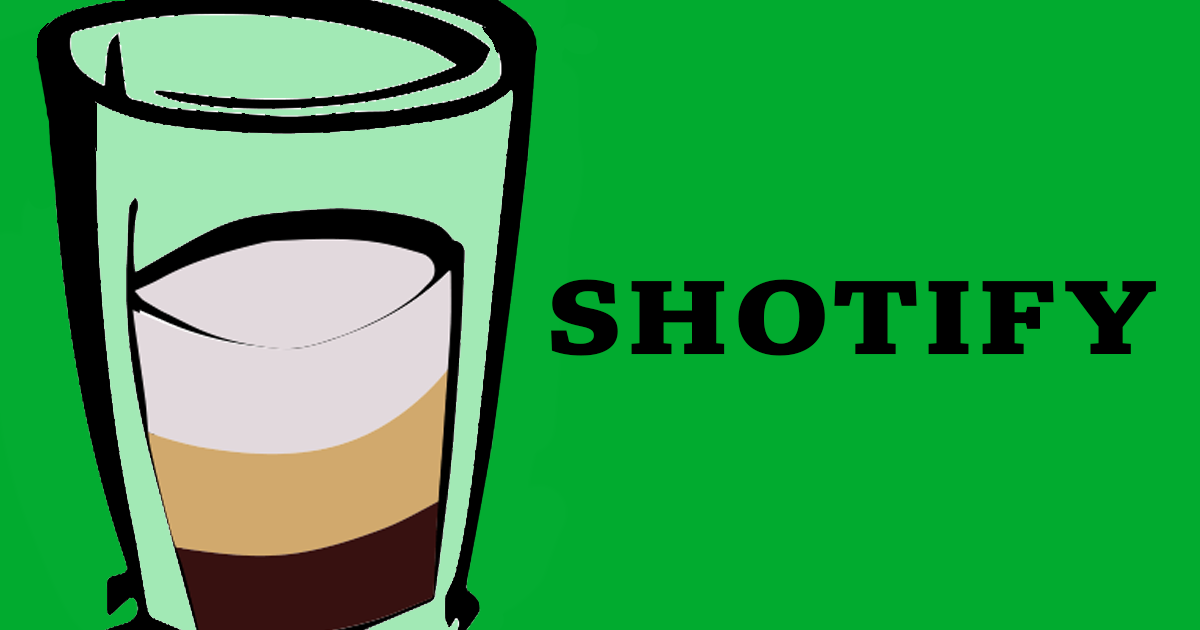
<style>
.page{position:relative;width:1200px;height:630px;background:#01ab2f}
.page>*{position:absolute;margin:0}
.t1{font:102px "BBCReithSerif-XBold";letter-spacing:0.04em;color:#000000;scale:1.17 1}
</style>
<div class="page">
<p class="t1" style="left:551px;top:279px;width:605px;height:77px">SHOTIFY</p>
</div>
